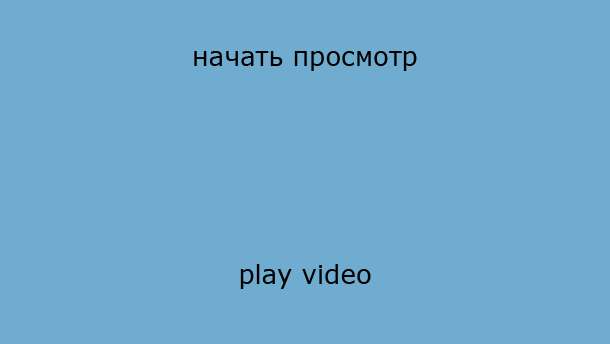
<style>
.page{position:relative;width:610px;height:344px;background:#6faccf}
.page>*{position:absolute;margin:0}
.t1{font:26px "Verdana";color:#000000}
</style>
<div class="page">
<p class="t1" style="left:194px;top:51px;width:223px;height:238px;text-align:center">начать просмотр<br><br><br><br><br><br><br>play video</p>
</div>
